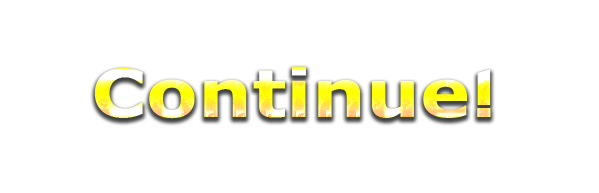
<style>
.page{position:relative;width:599px;height:193px;background:#ffffff}
.page>*{position:absolute;margin:0}
.t1{font:66.2px "Motken-noqta";scale:1.14 1}
</style>
<div class="page">
<p class="t1" style="left:94px;top:66px;width:397px;height:53px">!Continue</p>
</div>
